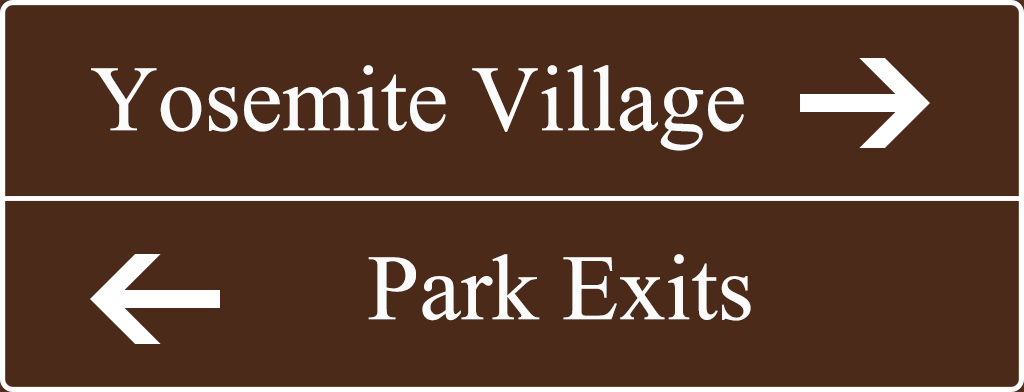
<style>
.page{position:relative;width:1024px;height:392px;background:#4c2a19}
.page>*{position:absolute;margin:0}
.t1{font:93.3px "IskoolaPota";color:#fbfbfb}
</style>
<div class="page">
<p class="t1" style="left:91px;top:65px;width:653px;height:86px">Yosemite Village</p>
<p class="t1" style="left:368px;top:254px;width:383px;height:67px">Park Exits</p>
</div>
